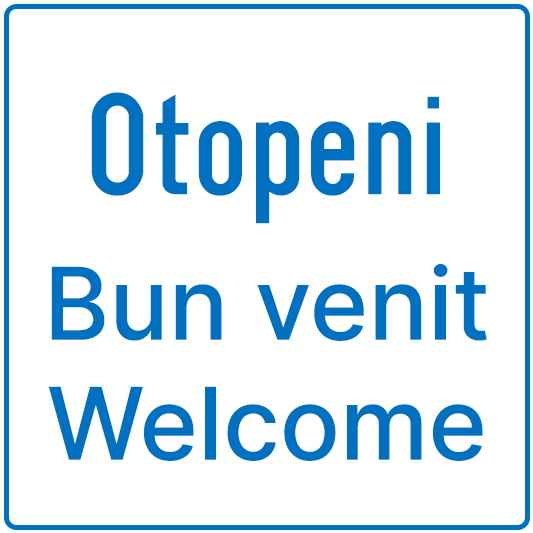
<style>
.page{position:relative;width:533px;height:533px;background:#ffffff}
.page>*{position:absolute;margin:0}
.t1{font:150px "SnvBeckerRegCond";color:#0070c0}
.t2{font:100px "InterV-Medium";color:#0070c0}
</style>
<div class="page">
<p class="t1" style="left:91px;top:92px;width:349px;height:132px">Otopeni</p>
<p class="t2" style="left:48px;top:264px;width:439px;height:197px;text-align:center">Bun venit<br>Welcome</p>
</div>
